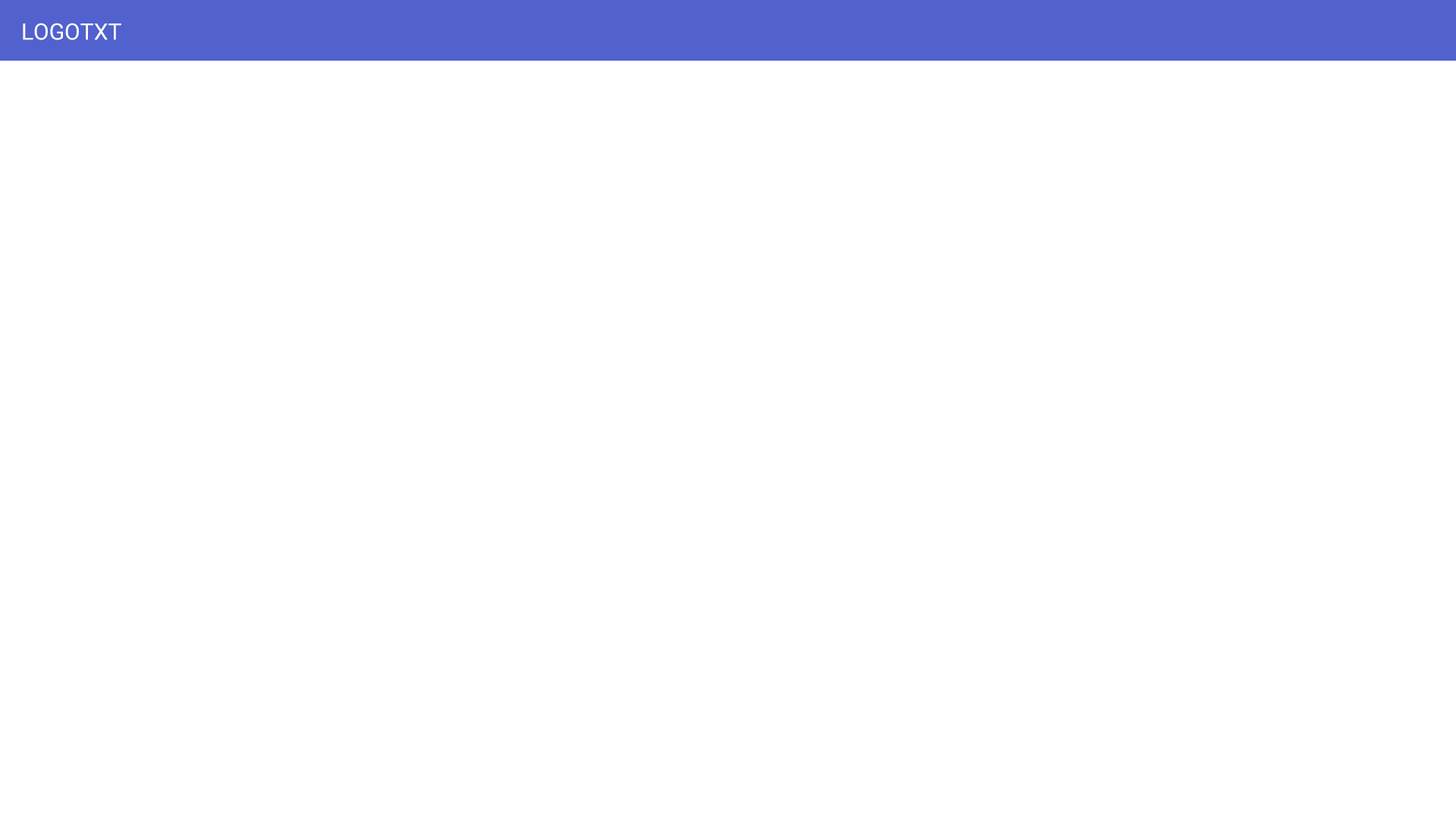
<style>
.page{position:relative;width:1456px;height:819px;background:#ffffff}
.page>*{position:absolute;margin:0}
.t1{font:22.7px "Roboto-Regular";color:#ffffff}
</style>
<div class="page">
<p class="t1" style="left:23px;top:23px;width:98px;height:17px">LOGOTXT</p>
</div>
